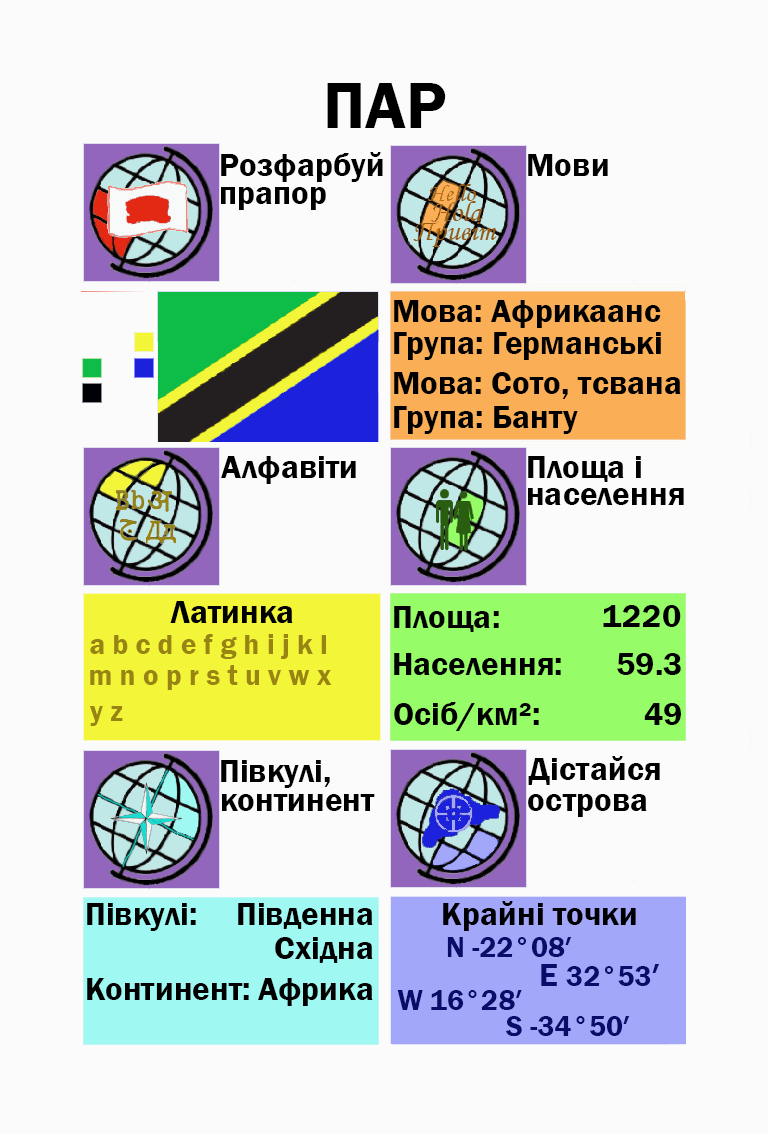
<style>
.page{position:relative;width:768px;height:1134px;background:#fbfbfb}
.page>*{position:absolute;margin:0}
.t1{font:66.7px "FranklinGothic-Demi";color:#000000}
.t2{font:33.3px "FranklinGothic-Demi";color:#000000}
.t3{font:33.3px "FranklinGothic-Demi";color:#000003}
.t4{font:29.2px "FranklinGothic-Demi";color:#988413}
.t5{font:29.2px "FranklinGothic-Demi";color:#090c69}
.t6{font:33.3px "FranklinGothic-Demi";color:#090c69}
</style>
<div class="page">
<p class="t1" style="left:327px;top:83px;width:119px;height:45px">ПАР</p>
<p class="t2" style="left:221px;top:152px;width:162px;height:30px">Розфарбуй</p>
<p class="t2" style="left:528px;top:154px;width:80px;height:22px">Мови</p>
<p class="t2" style="left:221px;top:187px;width:105px;height:23px">прапор</p>
<p class="t2" style="left:394px;top:300px;width:267px;height:28px">Мова: Африкаанс</p>
<p class="t2" style="left:394px;top:332px;width:267px;height:28px">Група: Германські</p>
<p class="t2" style="left:394px;top:372px;width:287px;height:27px">Мова: Сото, тсвана</p>
<p class="t2" style="left:394px;top:406px;width:184px;height:28px">Група: Банту</p>
<p class="t2" style="left:221px;top:456px;width:135px;height:28px">Алфавіти</p>
<p class="t2" style="left:528px;top:456px;width:113px;height:26px">Площа і</p>
<p class="t2" style="left:528px;top:488px;width:156px;height:17px">населення</p>
<p class="t2" style="left:170px;top:601px;width:123px;height:22px">Латинка</p>
<p class="t2" style="left:394px;top:606px;width:105px;height:26px">Площа:</p>
<p class="t3" style="left:603px;top:605px;width:78px;height:22px">1220</p>
<p class="t4" style="left:90px;top:634px;width:236px;height:25px">a b c d e f g h i j k l</p>
<p class="t2" style="left:394px;top:653px;width:167px;height:22px">Населення:</p>
<p class="t2" style="left:617px;top:653px;width:64px;height:22px">59.3</p>
<p class="t4" style="left:90px;top:665px;width:242px;height:25px">m n o p r s t u v w x</p>
<p class="t2" style="left:394px;top:702px;width:145px;height:29px">Осіб/км²:</p>
<p class="t4" style="left:89px;top:706px;width:34px;height:20px">y z</p>
<p class="t2" style="left:644px;top:703px;width:37px;height:22px">49</p>
<p class="t2" style="left:221px;top:760px;width:109px;height:28px">Півкулі,</p>
<p class="t2" style="left:528px;top:756px;width:132px;height:29px">Дістайся</p>
<p class="t2" style="left:222px;top:794px;width:153px;height:17px">континент</p>
<p class="t2" style="left:528px;top:794px;width:119px;height:23px">острова</p>
<p class="t2" style="left:87px;top:903px;width:109px;height:28px">Півкулі:</p>
<p class="t2" style="left:238px;top:903px;width:135px;height:26px">Південна</p>
<p class="t3" style="left:443px;top:901px;width:193px;height:30px">Крайні точки</p>
<p class="t2" style="left:275px;top:937px;width:98px;height:26px">Східна</p>
<p class="t5" style="left:447px;top:937px;width:125px;height:20px">N -22°08′</p>
<p class="t5" style="left:541px;top:964px;width:118px;height:22px"><span class="t6">E </span>32°53<span class="t6">′</span></p>
<p class="t2" style="left:87px;top:978px;width:162px;height:22px">Континент:</p>
<p class="t2" style="left:258px;top:978px;width:115px;height:28px">Африка</p>
<p class="t5" style="left:397px;top:990px;width:125px;height:20px">W 16°28′</p>
<p class="t5" style="left:506px;top:1016px;width:124px;height:21px">S -34°50′</p>
</div>
